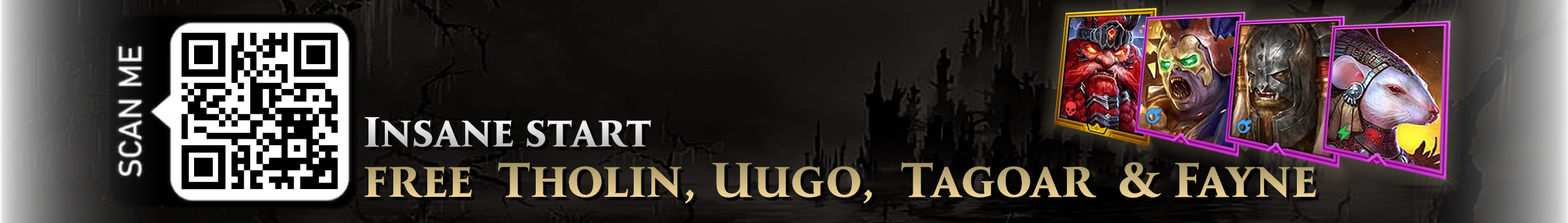
<style>
.page{position:relative;width:1568px;height:223px}
.page>*{position:absolute;margin:0}
.t1{font:41.9px "TranscendBold"}
.t2{font:48.3px "TranscendBold"}
</style>
<div class="page">
<p class="t1" style="left:365px;top:117px;width:286px;height:30px">Insane start</p>
<p class="t2" style="left:365px;top:162px;width:951px;height:41px">free  Tholin, Uugo,  Tagoar  &amp; Fayne</p>
</div>
